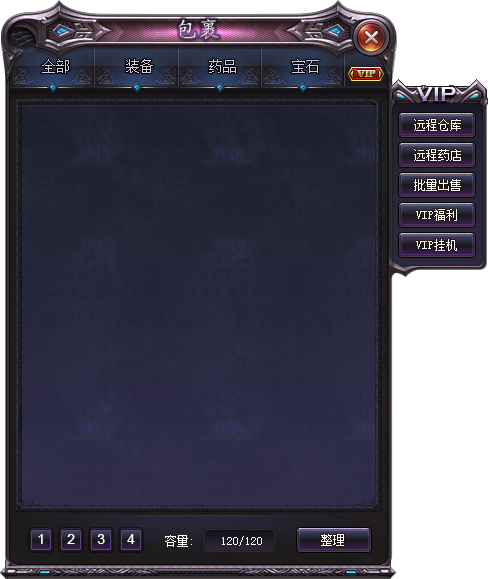
<style>
.page{position:relative;width:488px;height:579px}
.page>*{position:absolute;margin:0}
.t1{font:12px "NSimSun";color:#ffffff}
.t2{font:14px "ArialMT";color:#ffffff}
.t3{font:12px "SimSun";color:#ffffff}
</style>
<div class="page">
<p class="t1" style="left:414px;top:119px;width:47px;height:12px">远程仓库</p>
<p class="t1" style="left:414px;top:149px;width:47px;height:12px">远程药店</p>
<p class="t1" style="left:414px;top:179px;width:47px;height:12px">批量出售</p>
<p class="t1" style="left:416px;top:209px;width:41px;height:12px">VIP福利</p>
<p class="t1" style="left:416px;top:239px;width:41px;height:12px">VIP挂机</p>
<p class="t2" style="left:38px;top:534px;width:5px;height:10px">1</p>
<p class="t2" style="left:67px;top:534px;width:8px;height:10px">2</p>
<p class="t2" style="left:97px;top:534px;width:8px;height:10px">3</p>
<p class="t2" style="left:127px;top:534px;width:8px;height:10px">4</p>
<p class="t1" style="left:321px;top:534px;width:23px;height:12px">整理</p>
<p class="t3" style="left:165px;top:535px;width:27px;height:12px">容量:</p>
<p class="t3" style="left:222px;top:536px;width:40px;height:10px">120/120</p>
</div>
